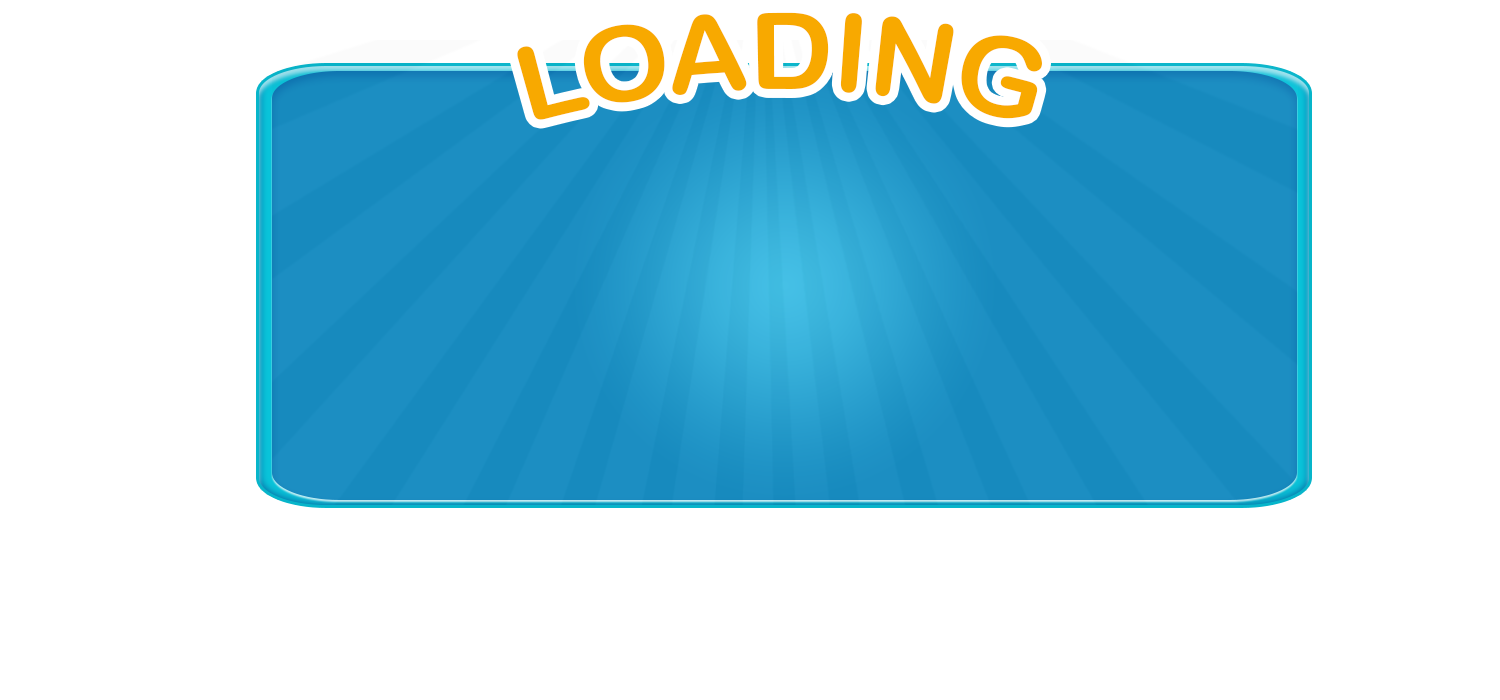
<style>
.page{position:relative;width:1500px;height:700px;background:#ffffff}
.page>*{position:absolute;margin:0}
.t1{font:106.7px "ArialRoundedMTBold";color:#f8a900;text-transform:uppercase}
</style>
<div class="page">
<p class="t1" style="left:517px;top:12px;width:525px;height:108px">LOADING</p>
</div>
